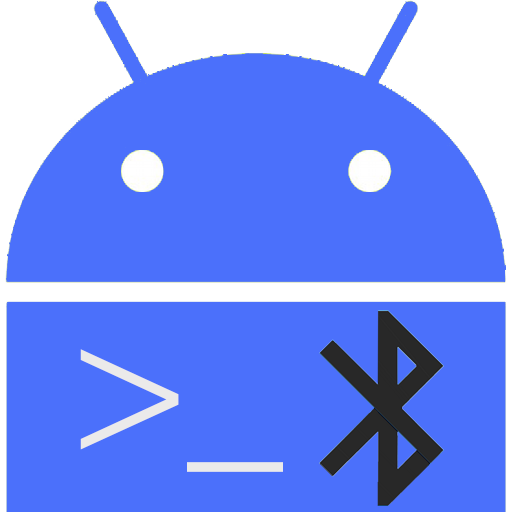
<style>
.page{position:relative;width:512px;height:512px;background:#4b70fb}
.page>*{position:absolute;margin:0}
.t1{font:192px "HelveticaNeue-Light";color:#ebeaea}
</style>
<div class="page">
<p class="t1" style="left:80px;top:349px;width:203px;height:123px">_&lt;</p>
</div>
